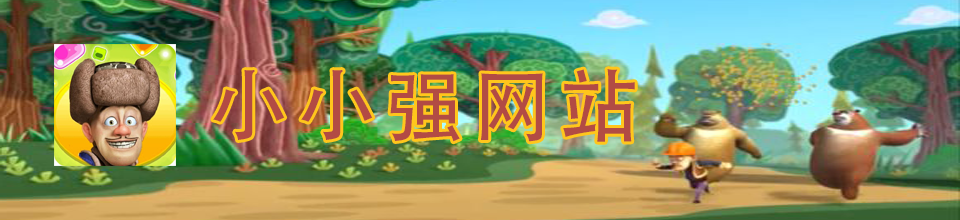
<style>
.page{position:relative;width:960px;height:220px}
.page>*{position:absolute;margin:0}
.t1{font:80px "AdobeHeitiStd-Regular";letter-spacing:0.1em;color:#b24b44}
</style>
<div class="page">
<p class="t1" style="left:213px;top:69px;width:422px;height:73px">小小强网站</p>
</div>
